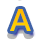
<style>
.page{position:relative;width:42px;height:42px;background:#ffffff}
.page>*{position:absolute;margin:0}
.t1{font:30.7px "PingFangHK-Semibold";color:#ffc900;text-transform:uppercase}
</style>
<div class="page">
<p class="t1" style="left:10px;top:9px;width:21px;height:22px">A</p>
</div>
